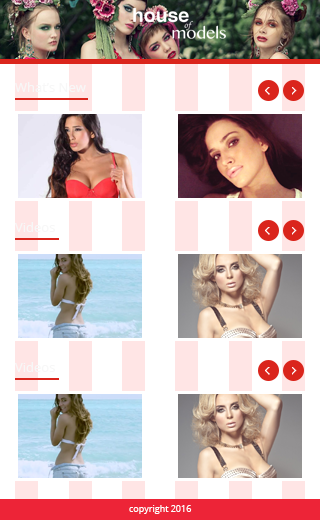
<style>
.page{position:relative;width:320px;height:520px;background:#ffffff}
.page>*{position:absolute;margin:0}
.t1{font:13px "OpenSans";color:#f7f7f7}
.t2{font:9px "OpenSans";color:#fefefe}
</style>
<div class="page">
<p class="t1" style="left:15px;top:82px;width:71px;height:10px">What’s New</p>
<p class="t1" style="left:15px;top:222px;width:40px;height:10px">Videos</p>
<p class="t1" style="left:15px;top:362px;width:40px;height:10px">Videos</p>
<p class="t2" style="left:129px;top:505px;width:63px;height:9px">copyright 2016</p>
</div>
